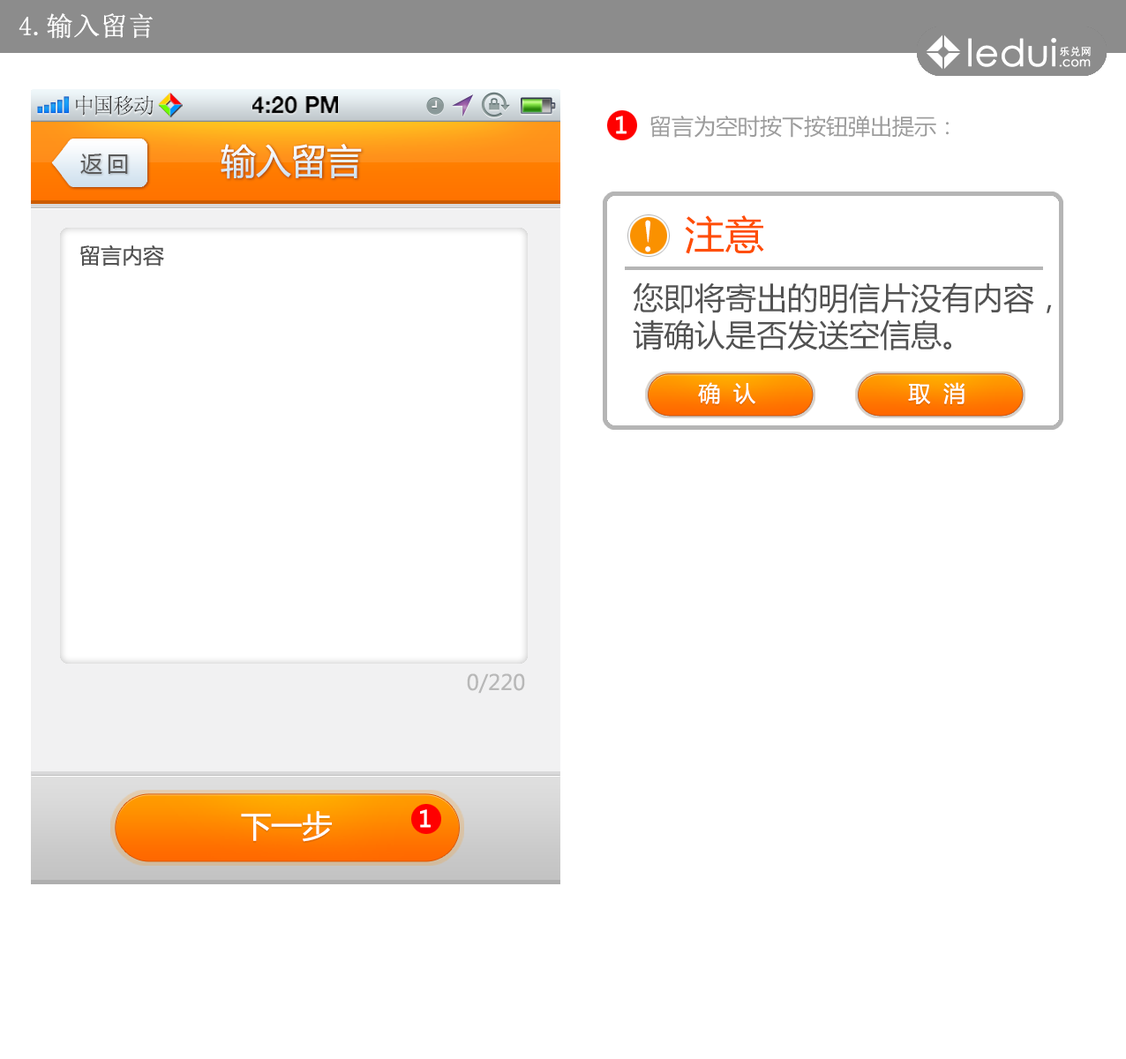
<style>
.page{position:relative;width:1126px;height:1059px;background:#ffffff}
.page>*{position:absolute;margin:0}
.t1{font:26.5px "SimSun";color:#ffffff;font-weight:bold}
.t2{font:21.5px "SimSun";color:#414141}
.t3{font:23.1px "HelveticaNeue-Bold";color:#000000;text-transform:uppercase}
.t4{font:22.1px "MicrosoftYaHei";color:#9c9c9c}
.t5{font:35.3px "MicrosoftYaHei";color:#e6eff6}
.t6{font:22.1px "MicrosoftYaHei";letter-spacing:0.2em;color:#5b5b5b}
.t7{font:35.3px "ç»å¸ç»¼èºä½ç®-regular";color:#ffffff}
.t8{font:39.7px "MicrosoftYaHei";color:#ff4e00}
.t9{font:21.2px "MicrosoftYaHei";color:#525252}
.t10{font:30.9px "MicrosoftYaHei";color:#525252}
.t11{font:22.1px "MicrosoftYaHei";color:#ffffff}
.t12{font:21.2px "MicrosoftYaHei";color:#b7b7b7}
.t13{font:30.6px "MicrosoftYaHei";color:#ffffff}
</style>
<div class="page">
<p class="t1" style="left:19px;top:13px;width:134px;height:26px">4.输入留言</p>
<p class="t2" style="left:76px;top:95px;width:78px;height:21px">中国移动</p>
<p class="t3" style="left:252px;top:96px;width:86px;height:18px">4:20 PM</p>
<p class="t4" style="left:650px;top:116px;width:299px;height:22px">留言为空时按下按钮弹出提示：</p>
<p class="t5" style="left:221px;top:144px;width:141px;height:35px">输入留言</p>
<p class="t6" style="left:80px;top:154px;width:48px;height:20px">返回</p>
<p class="t7" style="left:645px;top:220px;width:6px;height:32px">！</p>
<p class="t8" style="left:685px;top:215px;width:79px;height:39px">注意</p>
<p class="t9" style="left:80px;top:244px;width:84px;height:23px">留言内容</p>
<p class="t10" style="left:633px;top:282px;width:419px;height:68px">您即将寄出的明信片没有内容，<br>请确认是否发送空信息。</p>
<p class="t11" style="left:698px;top:382px;width:57px;height:23px">确  认</p>
<p class="t11" style="left:908px;top:382px;width:57px;height:22px">取  消</p>
<p class="t12" style="left:467px;top:673px;width:58px;height:21px">0/220</p>
<p class="t13" style="left:241px;top:811px;width:91px;height:31px">下一步</p>
</div>
